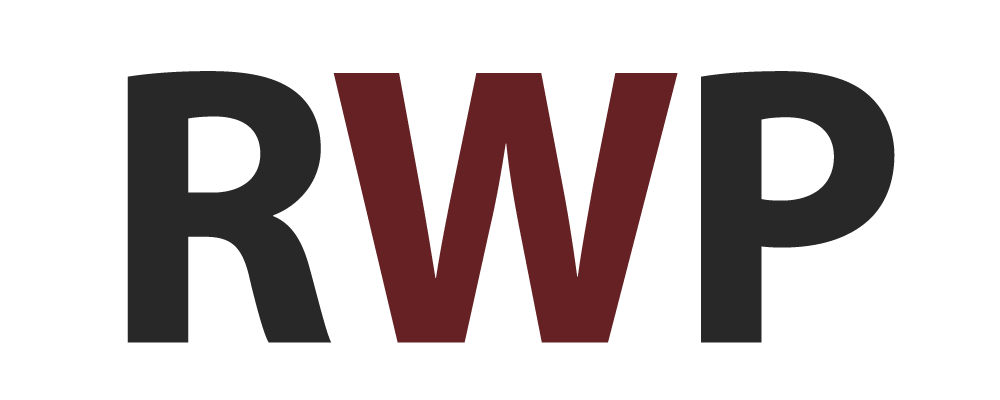
<style>
.page{position:relative;width:1000px;height:400px;background:#ffffff}
.page>*{position:absolute;margin:0}
.t1{font:399.4px "MyriadPro-Bold";letter-spacing:-0.02em;color:#282828}
.t2{font:399.4px "MyriadPro-Bold";letter-spacing:-0.02em;color:#652124}
</style>
<div class="page">
<p class="t1" style="left:127px;top:71px;width:768px;height:272px">R<span class="t2">W</span>P</p>
</div>
